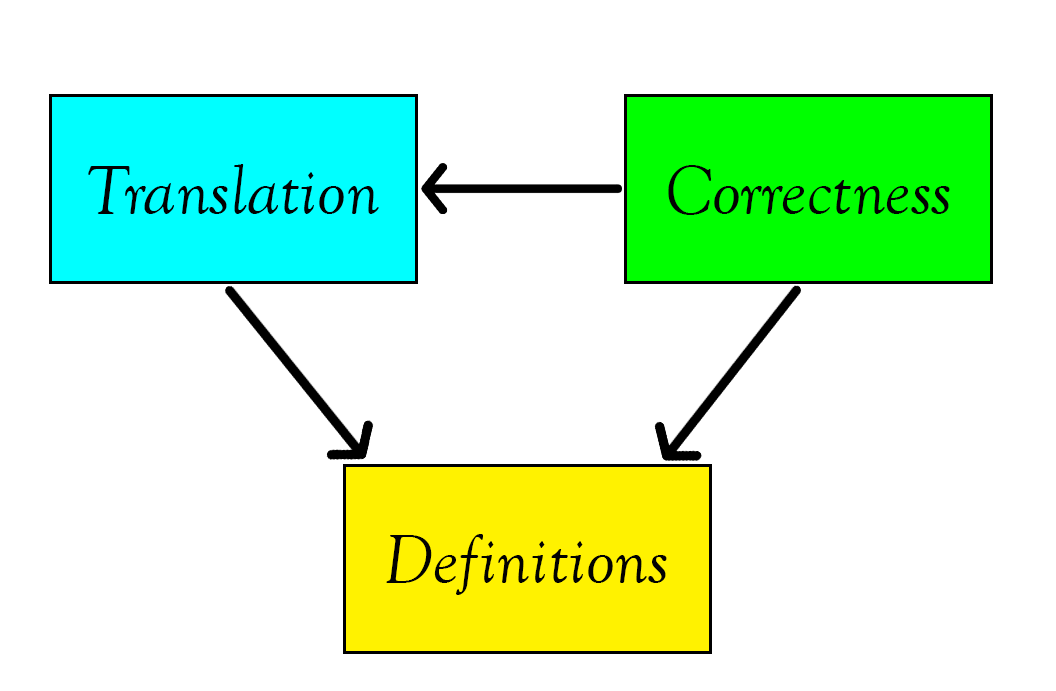
<style>
.page{position:relative;width:1056px;height:691px;background:#ffffff}
.page>*{position:absolute;margin:0}
.t1{font:72px "GoudyOldStyleT-Italic";color:#020202}
</style>
<div class="page">
<p class="t1" style="left:88px;top:164px;width:291px;height:50px">Translation</p>
<p class="t1" style="left:668px;top:165px;width:282px;height:50px">Correctness</p>
<p class="t1" style="left:386px;top:534px;width:281px;height:61px">Definitions</p>
</div>
